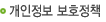
<style>
.page{position:relative;width:106px;height:22px;background:#ffffff}
.page>*{position:absolute;margin:0}
.t1{font:14px "YDIYGO330";color:#484848;scale:0.85 1}
</style>
<div class="page">
<p class="t1" style="left:9px;top:4px;width:91px;height:14px">개인정보 보호정책</p>
</div>
